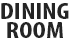
<style>
.page{position:relative;width:70px;height:44px;background:#ffffff}
.page>*{position:absolute;margin:0}
.t1{font:23px/19px "MyriadPro-BoldCond";color:#252525;scale:1.22 1}
</style>
<div class="page">
<p class="t1" style="left:1px;top:3px;width:68px;height:35px;text-align:center">DINING<br>ROOM</p>
</div>
